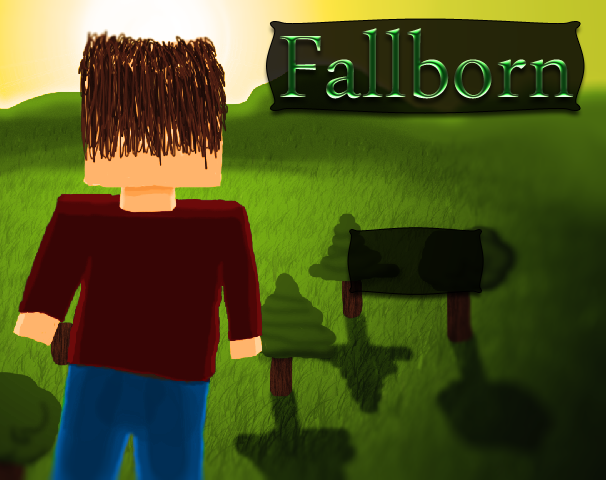
<style>
.page{position:relative;width:606px;height:480px}
.page>*{position:absolute;margin:0}
.t1{font:129.6px "DaunPenh"}
</style>
<div class="page">
<p class="t1" style="left:279px;top:28px;width:295px;height:71px">Fallborn</p>
</div>
